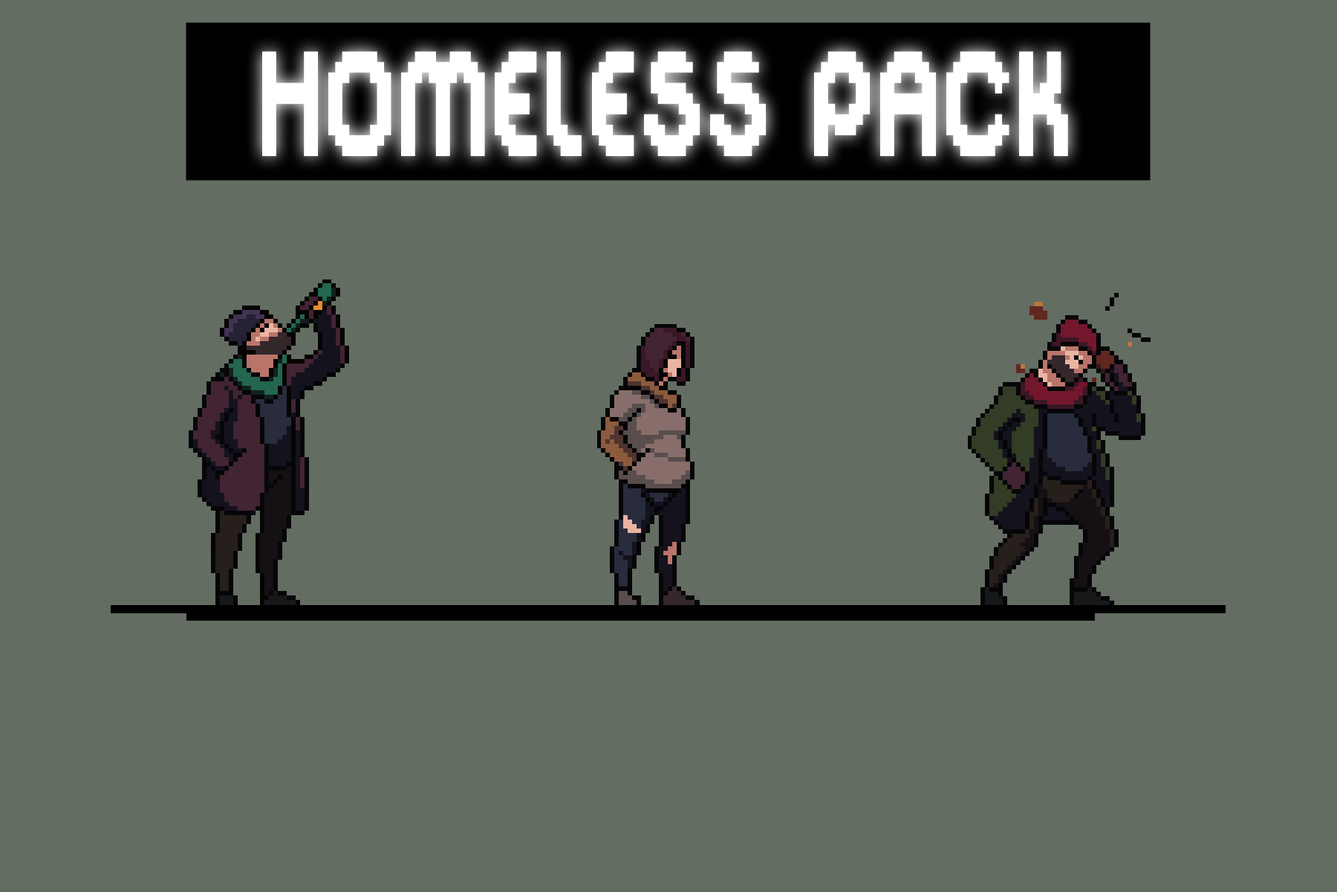
<style>
.page{position:relative;width:1337px;height:892px;background:#636d62}
.page>*{position:absolute;margin:0}
.t1{font:167.2px "DigitalDisco";letter-spacing:0.03em;color:#ffffff;scale:0.67 1}
</style>
<div class="page">
<p class="t1" style="left:262px;top:51px;width:806px;height:105px">HOMELESS PACK</p>
</div>
